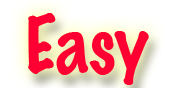
<style>
.page{position:relative;width:178px;height:88px;background:#ffffff}
.page>*{position:absolute;margin:0}
.t1{font:71.6px "MarkerFelt-Thin";color:#ff0033}
</style>
<div class="page">
<p class="t1" style="left:28px;top:13px;width:121px;height:72px">Easy</p>
<p class="t1" style="left:28px;top:13px;width:121px;height:72px">Easy</p>
</div>
